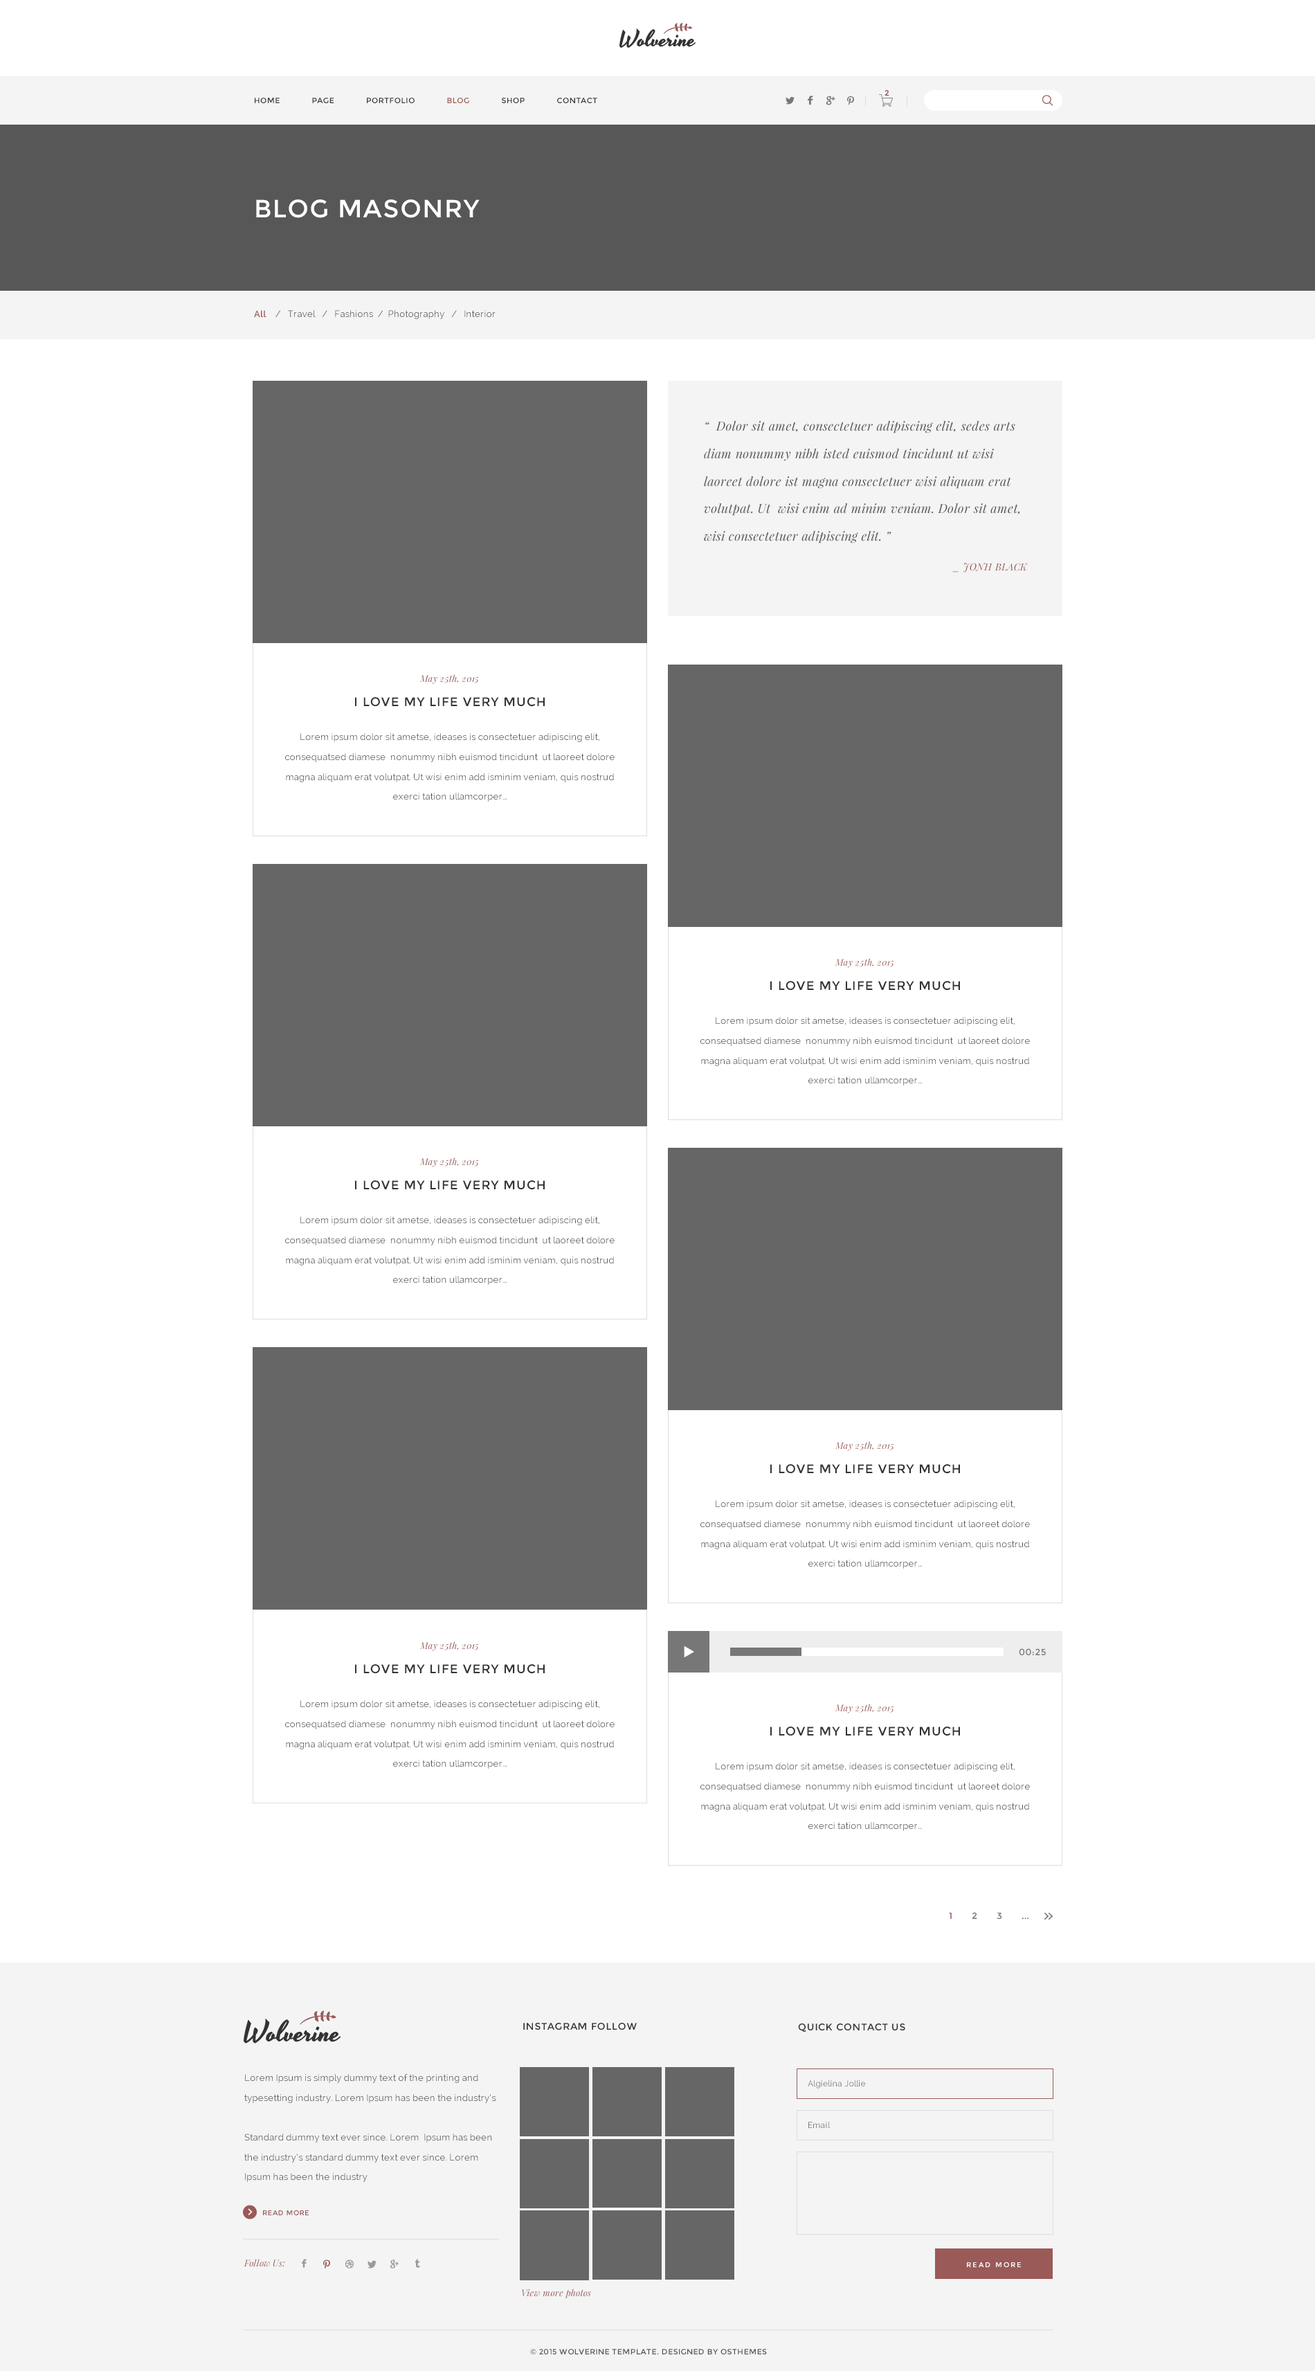
<style>
.page{position:relative;width:1315px;height:2371px;background:#ffffff}
.page>*{position:absolute;margin:0}
.t1{font:7.6px "Montserrat-Regular";letter-spacing:0.05em;color:#333333}
.t2{font:7.6px "Montserrat-Regular";letter-spacing:0.05em;color:#9b5a57}
.t3{font:7.6px "Montserrat-Regular";color:#9a5a58;font-weight:bold}
.t4{font:24.9px "Montserrat-Regular";letter-spacing:0.05em;color:#ffffff}
.t5{font:9px "Raleway";letter-spacing:0.02em;color:#535353}
.t6{font:9px "Raleway-SemiBold";letter-spacing:0.02em;color:#9a5957}
.t7{font:12.5px/27.4px "PlayfairDisplay-Italic";letter-spacing:0.02em;color:#535353}
.t8{font:9.7px "PlayfairDisplay-Italic";letter-spacing:0.02em;color:#995958}
.t9{font:9px "PlayfairDisplay-Italic";letter-spacing:0.02em;color:#995958}
.t10{font:12.5px "Montserrat-Regular";letter-spacing:0.05em;color:#333333}
.t11{font:9px/19.8px "Raleway";letter-spacing:0.02em;color:#545454}
.t12{font:9px "Montserrat-Regular";letter-spacing:0.04em;color:#777777}
.t13{font:9.7px "Montserrat-Regular";letter-spacing:0.05em;color:#333333}
.t14{font:8.3px "Raleway";letter-spacing:0.02em;color:#777777}
.t15{font:6.9px "Montserrat-Regular";letter-spacing:0.05em;color:#9a5a58}
.t16{font:6.9px "Montserrat-Regular";letter-spacing:0.2em;color:#ffffff}
.t17{font:9px "PlayfairDisplay-Italic";letter-spacing:0.02em;color:#9a5a58}
.t18{font:7.6px "Montserrat-Regular";letter-spacing:0.04em;color:#555555}
</style>
<div class="page">
<p class="t1" style="left:255px;top:98px;width:342px;height:5px">HOME      PAGE      PORTFOLIO      <span class="t2">BLOG</span>      SHOP      CONTACT</p>
<p class="t3" style="left:885px;top:90px;width:5px;height:6px">2</p>
<p class="t4" style="left:256px;top:199px;width:224px;height:19px">BLOG MASONRY</p>
<p class="t5" style="left:254px;top:310px;width:242px;height:9px"><span class="t6">All</span>    /   Travel   /   Fashions  /  Photography   /   Interior</p>
<p class="t7" style="left:704px;top:420px;width:316px;height:123px">“  Dolor sit amet, consectetuer adipiscing elit, sedes arts diam nonummy nibh isted euismod tincidunt ut wisi laoreet dolore ist magna consectetuer wisi aliquam erat volutpat. Ut  wisi enim ad minim veniam. Dolor sit amet, wisi consectetuer adipiscing elit. ”</p>
<p class="t8" style="left:953px;top:563px;width:74px;height:10px">_ JONH BLACK</p>
<p class="t9" style="left:420px;top:674px;width:59px;height:10px">May 25th, 2015</p>
<p class="t10" style="left:355px;top:697px;width:190px;height:10px">I LOVE MY LIFE VERY MUCH</p>
<p class="t11" style="left:285px;top:733px;width:330px;height:69px;text-align:center">Lorem ipsum dolor sit ametse, ideases is consectetuer adipiscing elit, consequatsed diamese  nonummy nibh euismod tincidunt  ut laoreet dolore magna aliquam erat volutpat. Ut wisi enim add isminim veniam, quis nostrud exerci tation ullamcorper...</p>
<p class="t9" style="left:835px;top:958px;width:59px;height:10px">May 25th, 2015</p>
<p class="t10" style="left:771px;top:981px;width:189px;height:10px">I LOVE MY LIFE VERY MUCH</p>
<p class="t11" style="left:701px;top:1017px;width:329px;height:69px;text-align:center">Lorem ipsum dolor sit ametse, ideases is consectetuer adipiscing elit, consequatsed diamese  nonummy nibh euismod tincidunt  ut laoreet dolore magna aliquam erat volutpat. Ut wisi enim add isminim veniam, quis nostrud exerci tation ullamcorper...</p>
<p class="t9" style="left:420px;top:1158px;width:59px;height:9px">May 25th, 2015</p>
<p class="t10" style="left:355px;top:1180px;width:190px;height:10px">I LOVE MY LIFE VERY MUCH</p>
<p class="t11" style="left:285px;top:1216px;width:330px;height:69px;text-align:center">Lorem ipsum dolor sit ametse, ideases is consectetuer adipiscing elit, consequatsed diamese  nonummy nibh euismod tincidunt  ut laoreet dolore magna aliquam erat volutpat. Ut wisi enim add isminim veniam, quis nostrud exerci tation ullamcorper...</p>
<p class="t9" style="left:835px;top:1441px;width:59px;height:10px">May 25th, 2015</p>
<p class="t10" style="left:771px;top:1464px;width:189px;height:10px">I LOVE MY LIFE VERY MUCH</p>
<p class="t11" style="left:701px;top:1500px;width:329px;height:69px;text-align:center">Lorem ipsum dolor sit ametse, ideases is consectetuer adipiscing elit, consequatsed diamese  nonummy nibh euismod tincidunt  ut laoreet dolore magna aliquam erat volutpat. Ut wisi enim add isminim veniam, quis nostrud exerci tation ullamcorper...</p>
<p class="t9" style="left:420px;top:1641px;width:59px;height:10px">May 25th, 2015</p>
<p class="t12" style="left:1019px;top:1648px;width:27px;height:7px">00:25</p>
<p class="t10" style="left:355px;top:1664px;width:190px;height:10px">I LOVE MY LIFE VERY MUCH</p>
<p class="t11" style="left:285px;top:1700px;width:330px;height:69px;text-align:center">Lorem ipsum dolor sit ametse, ideases is consectetuer adipiscing elit, consequatsed diamese  nonummy nibh euismod tincidunt  ut laoreet dolore magna aliquam erat volutpat. Ut wisi enim add isminim veniam, quis nostrud exerci tation ullamcorper...</p>
<p class="t9" style="left:835px;top:1704px;width:59px;height:9px">May 25th, 2015</p>
<p class="t10" style="left:771px;top:1727px;width:189px;height:9px">I LOVE MY LIFE VERY MUCH</p>
<p class="t11" style="left:701px;top:1763px;width:329px;height:68px;text-align:center">Lorem ipsum dolor sit ametse, ideases is consectetuer adipiscing elit, consequatsed diamese  nonummy nibh euismod tincidunt  ut laoreet dolore magna aliquam erat volutpat. Ut wisi enim add isminim veniam, quis nostrud exerci tation ullamcorper...</p>
<p class="t13" style="left:523px;top:2023px;width:114px;height:7px">INSTAGRAM FOLLOW</p>
<p class="t13" style="left:798px;top:2024px;width:108px;height:8px">QUICK CONTACT US</p>
<p class="t11" style="left:244px;top:2074px;width:252px;height:108px">Lorem Ipsum is simply dummy text of the printing and typesetting industry. Lorem Ipsum has been the industry’s <br> <br>Standard dummy text ever since. Lorem  Ipsum has been the industry’s standard dummy text ever since. Lorem  Ipsum has been the industry</p>
<p class="t14" style="left:808px;top:2080px;width:58px;height:9px">Algielina Jollie</p>
<p class="t14" style="left:809px;top:2122px;width:22px;height:6px">Email</p>
<p class="t15" style="left:263px;top:2210px;width:46px;height:5px">READ MORE</p>
<p class="t9" style="left:244px;top:2259px;width:41px;height:8px">Follow Us:</p>
<p class="t16" style="left:967px;top:2262px;width:54px;height:5px">READ MORE</p>
<p class="t17" style="left:522px;top:2289px;width:69px;height:9px">View more photos</p>
<p class="t18" style="left:530px;top:2349px;width:237px;height:6px">© 2015 WOLVERINE TEMPLATE. DESIGNED BY OSTHEMES</p>
</div>
